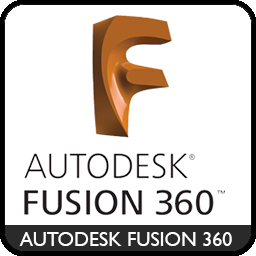
<style>
.page{position:relative;width:256px;height:256px;background:#ffffff}
.page>*{position:absolute;margin:0}
.t1{font:20px "GillSansMT";color:#ffffff}
</style>
<div class="page">
<p class="t1" style="left:19px;top:232px;width:213px;height:14px">AUTODESK FUSION 360</p>
</div>
